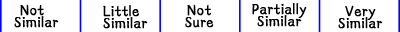
<style>
.page{position:relative;width:400px;height:32px;background:#ffffff}
.page>*{position:absolute;margin:0}
.t1{font:16px/12px "HGXS_CNKI";letter-spacing:0.02em;color:#000000;font-weight:bold;scale:0.94 1}
</style>
<div class="page">
<p class="t1" style="left:14px;top:4px;width:45px;height:24px;text-align:center">Not <br>Similar</p>
<p class="t1" style="left:103px;top:5px;width:45px;height:24px;text-align:center">Little <br>Similar</p>
<p class="t1" style="left:185px;top:4px;width:29px;height:24px;text-align:center">Not<br>Sure</p>
<p class="t1" style="left:252px;top:3px;width:55px;height:24px;text-align:center">Partially<br>Similar</p>
<p class="t1" style="left:338px;top:5px;width:45px;height:24px;text-align:center">Very<br>Similar</p>
</div>
